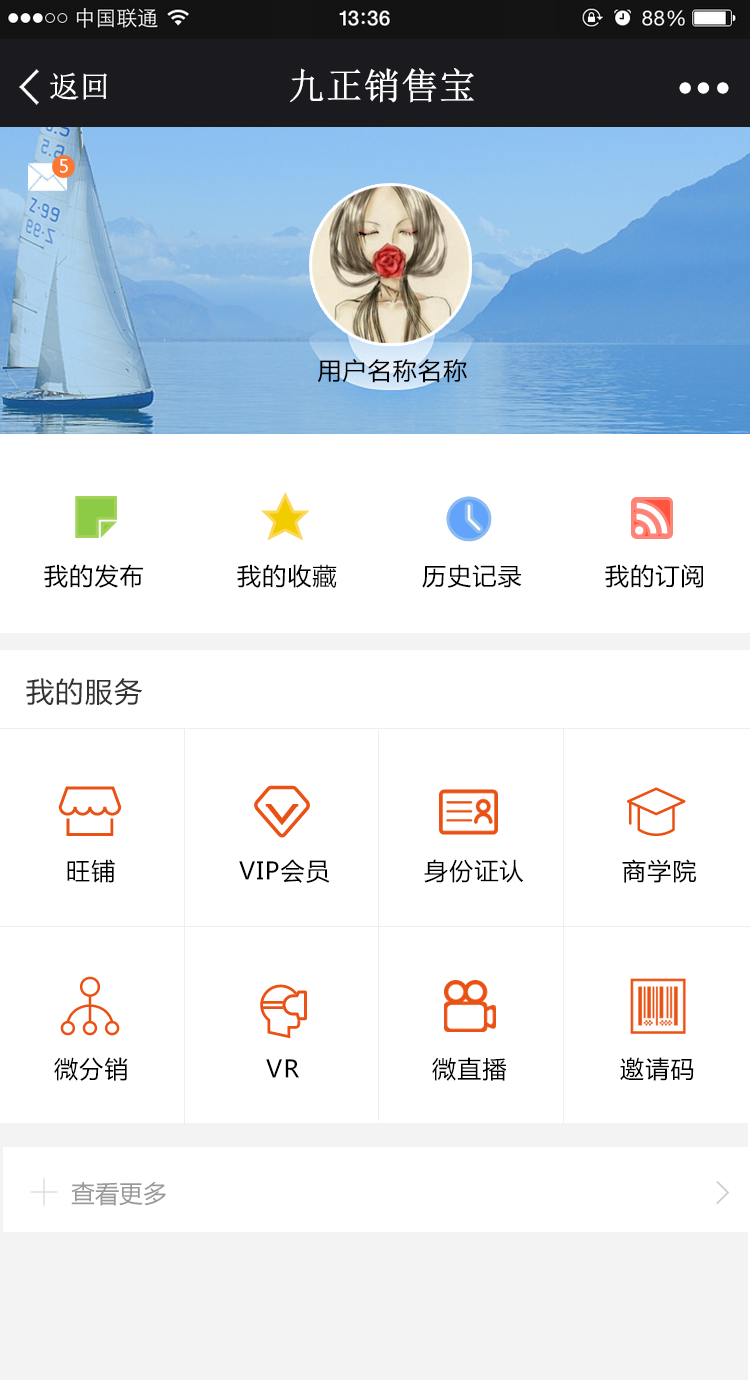
<style>
.page{position:relative;width:750px;height:1380px;background:#ffffff}
.page>*{position:absolute;margin:0}
.t1{font:30px "NSimSun";color:#ffffff;font-weight:bold}
.t2{font:36.7px "NSimSun";color:#ffffff;font-weight:bold}
.t3{font:18px "MicrosoftYaHei";letter-spacing:0.05em;color:#ffffff}
.t4{font:24px "MicrosoftYaHei";letter-spacing:0.05em;color:#000000}
.t5{font:28px "MicrosoftYaHei";letter-spacing:0.05em;color:#333333}
.t6{font:24px "MicrosoftYaHei";color:#999999}
</style>
<div class="page">
<p class="t1" style="left:50px;top:72px;width:57px;height:28px">返回</p>
<p class="t2" style="left:290px;top:68px;width:184px;height:35px">九正销售宝</p>
<p class="t3" style="left:60px;top:159px;width:8px;height:14px">5</p>
<p class="t4" style="left:318px;top:358px;width:149px;height:25px">用户名称名称</p>
<p class="t4" style="left:44px;top:564px;width:99px;height:24px">我的发布</p>
<p class="t4" style="left:237px;top:564px;width:100px;height:24px">我的收藏</p>
<p class="t4" style="left:422px;top:564px;width:100px;height:24px">历史记录</p>
<p class="t4" style="left:605px;top:564px;width:98px;height:24px">我的订阅</p>
<p class="t5" style="left:26px;top:678px;width:116px;height:28px">我的服务</p>
<p class="t4" style="left:67px;top:859px;width:48px;height:24px">旺铺</p>
<p class="t4" style="left:239px;top:859px;width:91px;height:24px">VIP会员</p>
<p class="t4" style="left:424px;top:859px;width:100px;height:24px">身份证认</p>
<p class="t4" style="left:622px;top:859px;width:75px;height:24px">商学院</p>
<p class="t4" style="left:54px;top:1057px;width:74px;height:24px">微分销</p>
<p class="t4" style="left:266px;top:1059px;width:33px;height:19px">VR</p>
<p class="t4" style="left:432px;top:1057px;width:75px;height:24px">微直播</p>
<p class="t4" style="left:620px;top:1057px;width:74px;height:24px">邀请码</p>
<p class="t6" style="left:71px;top:1182px;width:95px;height:24px">查看更多</p>
</div>
